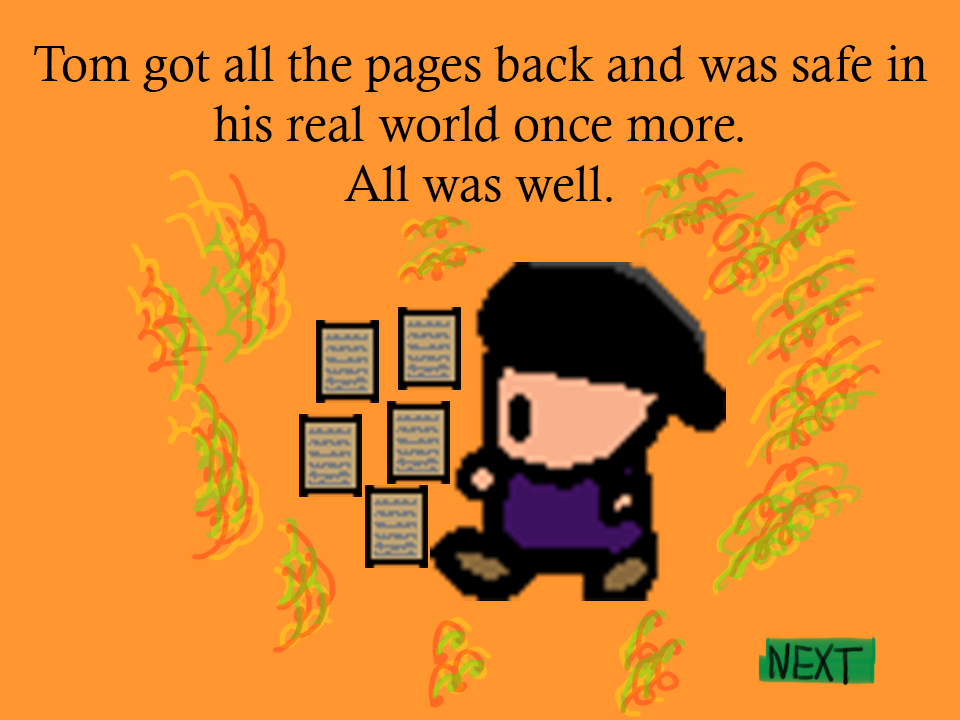
<style>
.page{position:relative;width:960px;height:720px;background:#ff9630}
.page>*{position:absolute;margin:0}
.t1{font:50px "CalistoMT";color:#000000}
</style>
<div class="page">
<p class="t1" style="left:34px;top:45px;width:894px;height:157px;text-align:center">Tom got all the pages back and was safe in his real world once more.<br>All was well.</p>
</div>
